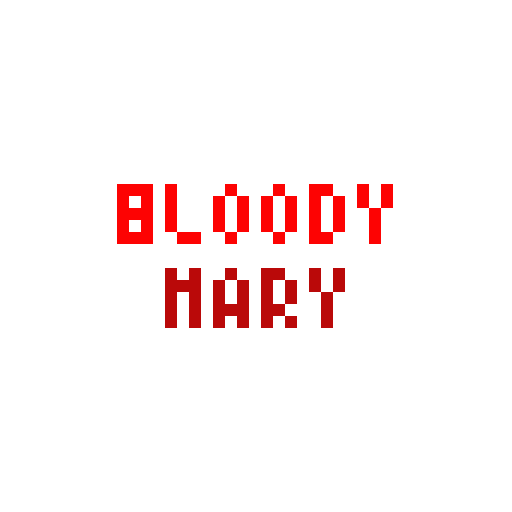
<style>
.page{position:relative;width:512px;height:512px;background:#ffffff}
.page>*{position:absolute;margin:0}
.t1{font:96px "04b24";color:#fd0303}
.t2{font:96px "04b24";color:#ba0909}
</style>
<div class="page">
<p class="t1" style="left:117px;top:184px;width:276px;height:60px">Bloody</p>
<p class="t2" style="left:165px;top:268px;width:180px;height:60px">Mary</p>
</div>
